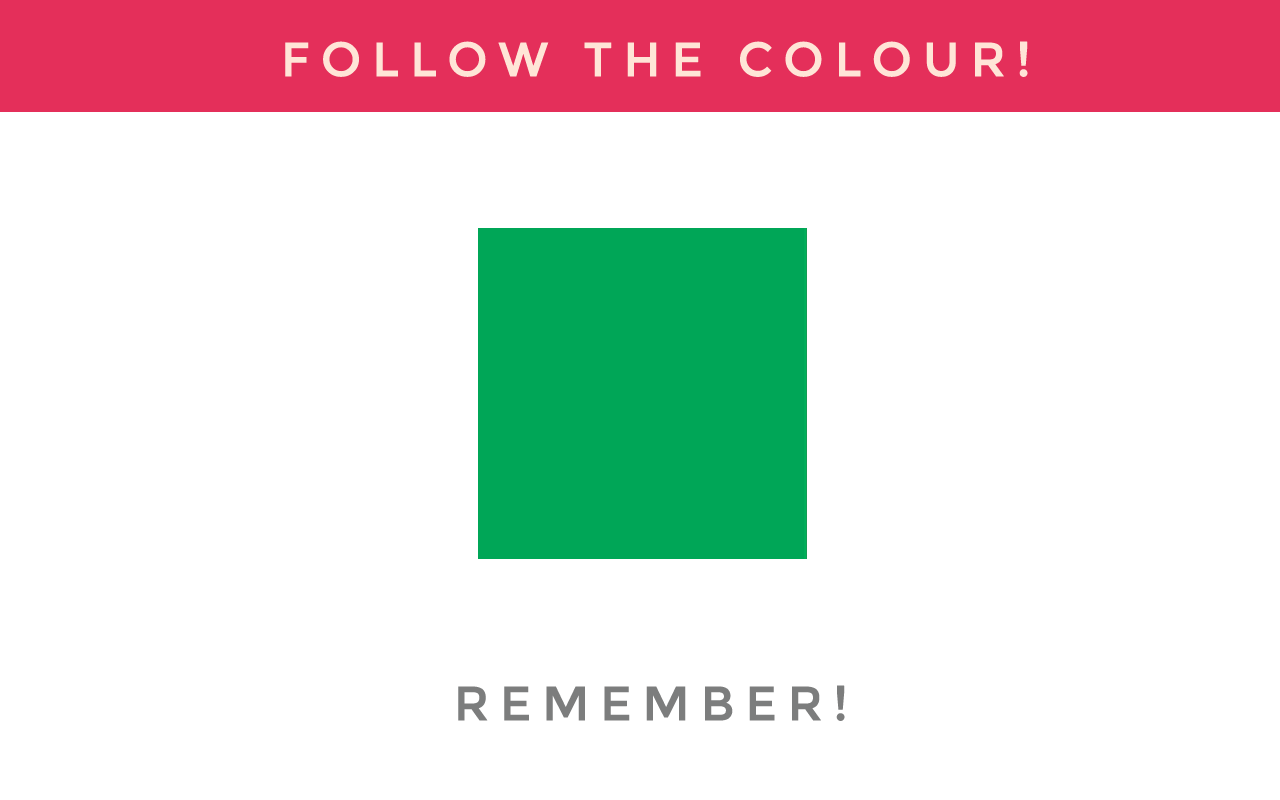
<style>
.page{position:relative;width:1280px;height:800px;background:#ffffff}
.page>*{position:absolute;margin:0}
.t1{font:48px "Montserrat-Regular";letter-spacing:0.2em;color:#ffe5d7;text-transform:uppercase;font-weight:bold}
.t2{font:48px "Montserrat-Regular";letter-spacing:0.2em;color:#7c7d7d;text-transform:uppercase;font-weight:bold}
</style>
<div class="page">
<p class="t1" style="left:285px;top:41px;width:743px;height:36px">Follow the Colour!</p>
<p class="t2" style="left:458px;top:685px;width:387px;height:36px">REMEMBER!</p>
</div>
